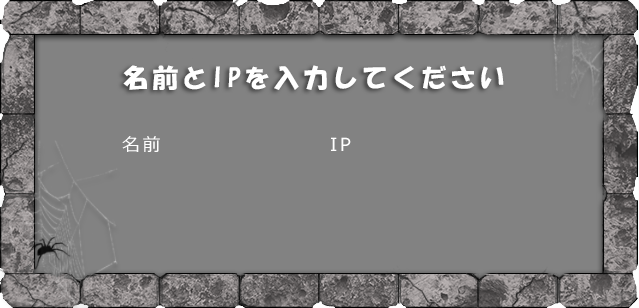
<style>
.page{position:relative;width:639px;height:308px;background:#828282}
.page>*{position:absolute;margin:0}
.t1{font:25.8px "HGSoeiKakupoptai";letter-spacing:0.14em;color:#ffffff}
.t2{font:18px "Meiryo";letter-spacing:0.14em;color:#ffffff}
</style>
<div class="page">
<p class="t1" style="left:123px;top:65px;width:381px;height:25px">名前とIPを入力してください</p>
<p class="t2" style="left:122px;top:136px;width:38px;height:16px">名前</p>
<p class="t2" style="left:331px;top:137px;width:20px;height:14px">IP</p>
</div>
